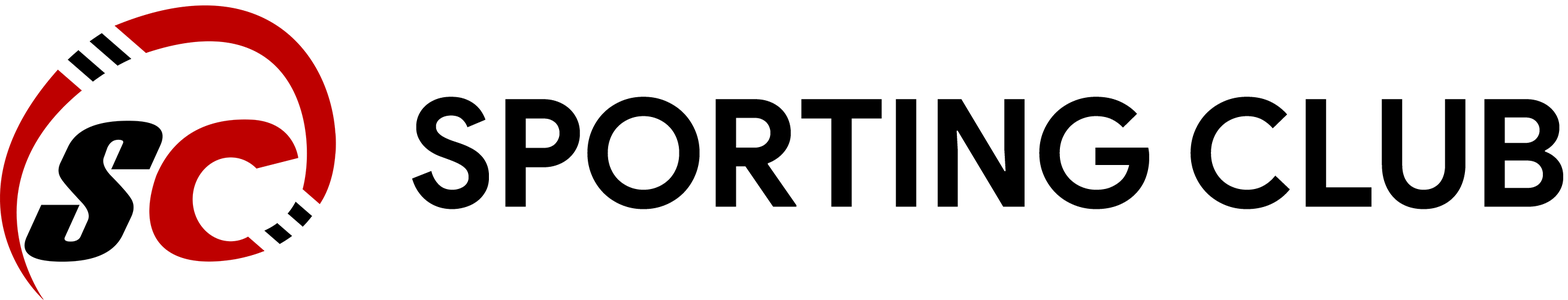
<style>
.page{position:relative;width:1568px;height:300px;background:#ffffff}
.page>*{position:absolute;margin:0}
.t1{font:149.8px "ProductSans-Bold";color:#000000}
</style>
<div class="page">
<p class="t1" style="left:412px;top:96px;width:1151px;height:113px">SPORTING CLUB</p>
</div>
